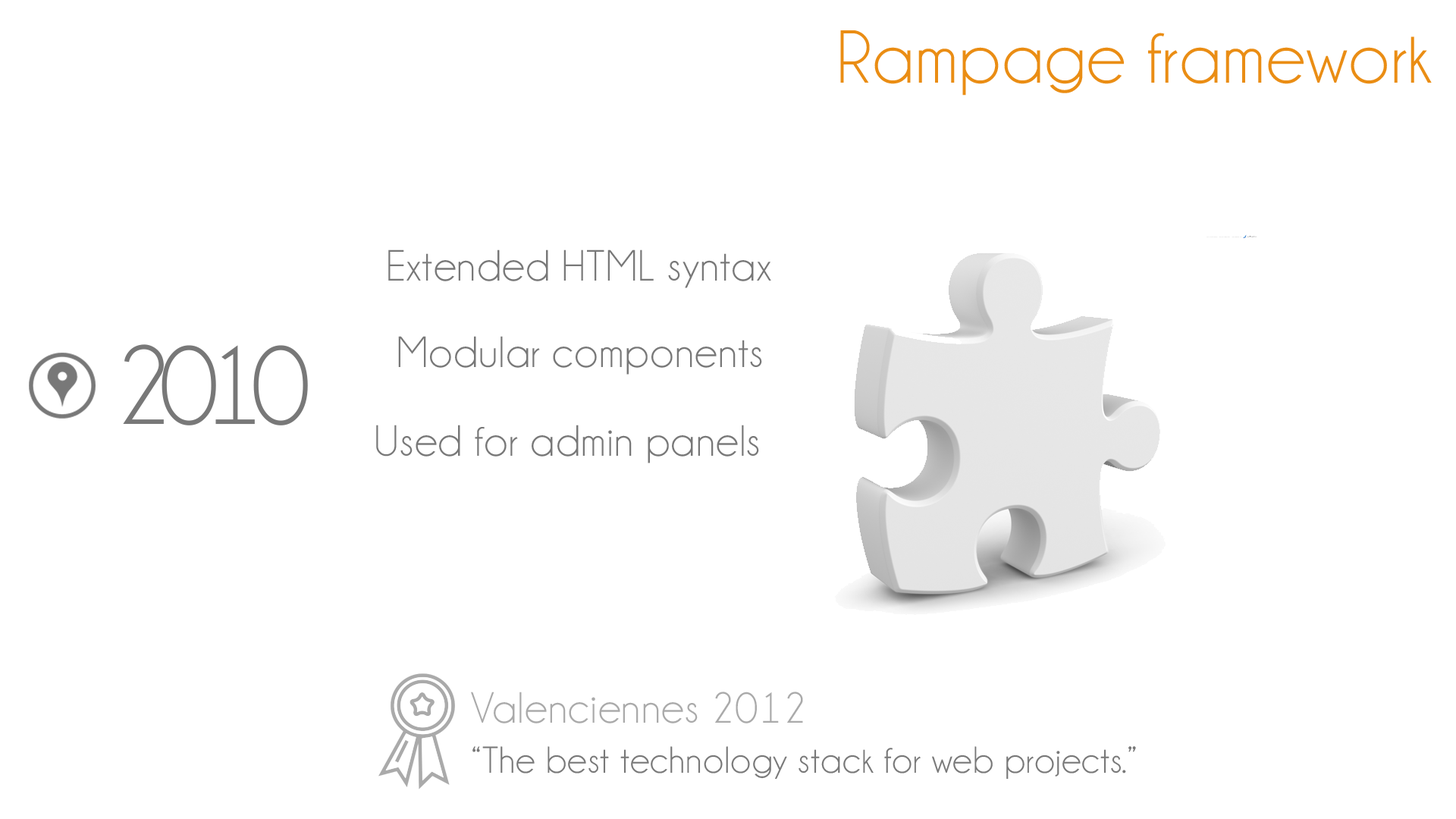
<style>
.page{position:relative;width:1456px;height:819px;background:#ffffff}
.page>*{position:absolute;margin:0}
.t1{font:75.8px "Champagne&Limousines";letter-spacing:0.02em;color:#ea8d14}
.t2{font:44.2px "Champagne&Limousines";letter-spacing:0.02em;color:#787878}
.t3{font:113.7px "Champagne&Limousines";letter-spacing:-0.12em;color:#787878}
.t4{font:44.2px "Champagne&Limousines";letter-spacing:0.02em;color:#aaaaaa}
.t5{font:37.9px "Champagne&Limousines";letter-spacing:0.02em;color:#787878}
</style>
<div class="page">
<p class="t1" style="left:840px;top:30px;width:592px;height:66px">Rampage framework</p>
<p class="t2" style="left:388px;top:249px;width:383px;height:39px">Extended HTML syntax</p>
<p class="t2" style="left:398px;top:336px;width:364px;height:39px">Modular components</p>
<p class="t3" style="left:123px;top:344px;width:185px;height:81px">2010</p>
<p class="t2" style="left:376px;top:425px;width:383px;height:38px">Used for admin panels</p>
<p class="t4" style="left:471px;top:692px;width:332px;height:31px">Valenciennes 2012</p>
<p class="t5" style="left:472px;top:746px;width:664px;height:34px">“The best technology stack for web projects.”</p>
</div>
